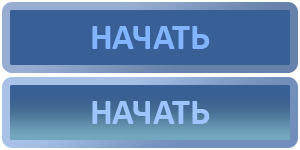
<style>
.page{position:relative;width:300px;height:150px;background:#395f97}
.page>*{position:absolute;margin:0}
.t1{font:36px "Calibri-Bold";color:#82b4ff}
.t2{font:36px "Calibri-Bold";color:#9ec5ff}
</style>
<div class="page">
<p class="t1" style="left:92px;top:26px;width:118px;height:23px">НАЧАТЬ</p>
<p class="t2" style="left:92px;top:101px;width:118px;height:23px">НАЧАТЬ</p>
</div>
